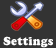
<style>
.page{position:relative;width:56px;height:48px;background:#333333}
.page>*{position:absolute;margin:0}
.t1{font:12px "CooperBlack";color:#fefefe}
</style>
<div class="page">
<p class="t1" style="left:3px;top:36px;width:50px;height:12px">Settings</p>
</div>
